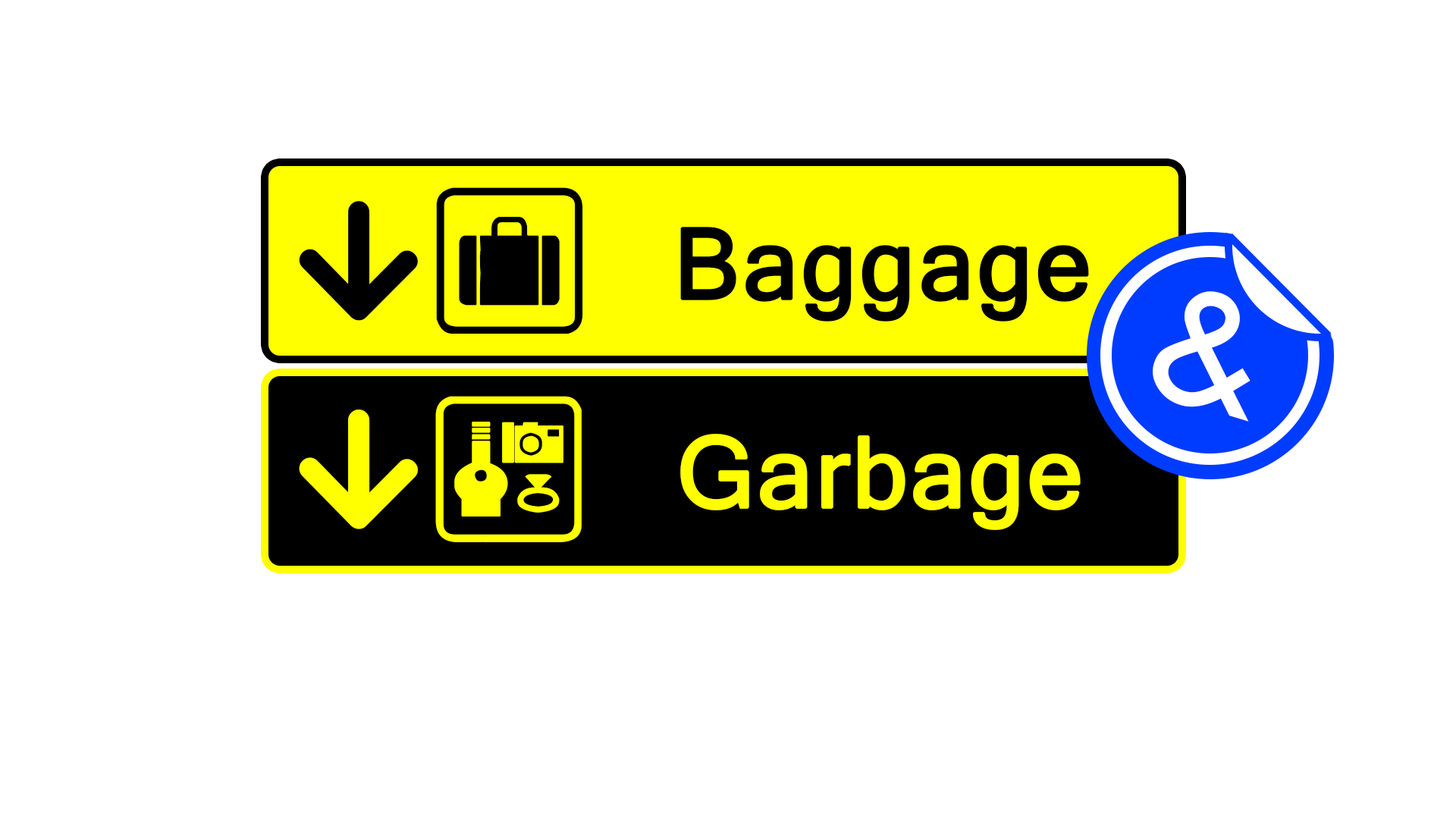
<style>
.page{position:relative;width:1456px;height:819px;background:#ffffff}
.page>*{position:absolute;margin:0}
.t1{font:189.6px "IconicPictograms-Bold";color:#000000}
.t2{font:98.6px "MicrosoftSansSerif";letter-spacing:0.01em;color:#000000;font-weight:bold}
.t3{font:178.2px "TwCenMT-Regular";color:#ffffff}
.t4{font:189.6px "IconicPictograms-Bold";color:#ffff00}
.t5{font:98.6px "MicrosoftSansSerif";letter-spacing:0.01em;color:#ffff00;font-weight:bold}
</style>
<div class="page">
<p class="t1" style="left:299px;top:201px;width:119px;height:120px;rotate:-90deg">&lt;</p>
<p class="t2" style="left:680px;top:227px;width:409px;height:95px">Baggage</p>
<p class="t3" style="left:1153px;top:291px;width:97px;height:131px;rotate:17deg">&amp;</p>
<p class="t4" style="left:299px;top:409px;width:119px;height:120px;rotate:-90deg">&lt;</p>
<p class="t5" style="left:680px;top:434px;width:401px;height:96px">Garbage</p>
</div>
